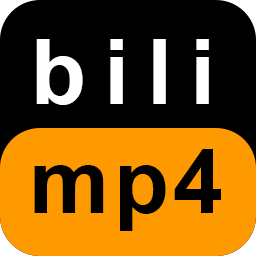
<style>
.page{position:relative;width:256px;height:256px;background:#000000}
.page>*{position:absolute;margin:0}
.t1{font:90px "Arial-BoldMT";letter-spacing:0.2em;color:#ffffff}
.t2{font:90px "Arial-BoldMT";letter-spacing:0.05em;color:#000000}
</style>
<div class="page">
<p class="t1" style="left:36px;top:39px;width:173px;height:66px">bili</p>
<p class="t2" style="left:34px;top:149px;width:187px;height:82px">mp4</p>
</div>
